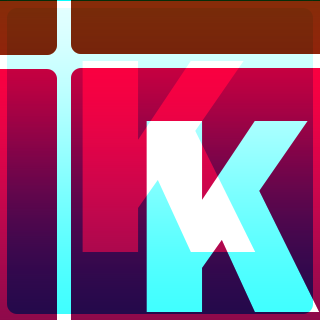
<style>
.page{position:relative;width:320px;height:320px}
.page>*{position:absolute;margin:0}
.t1{font:287.2px "FranklinGothic-Heavy"}
</style>
<div class="page">
<p class="t1" style="left:82px;top:60px;width:174px;height:191px">K</p>
</div>
